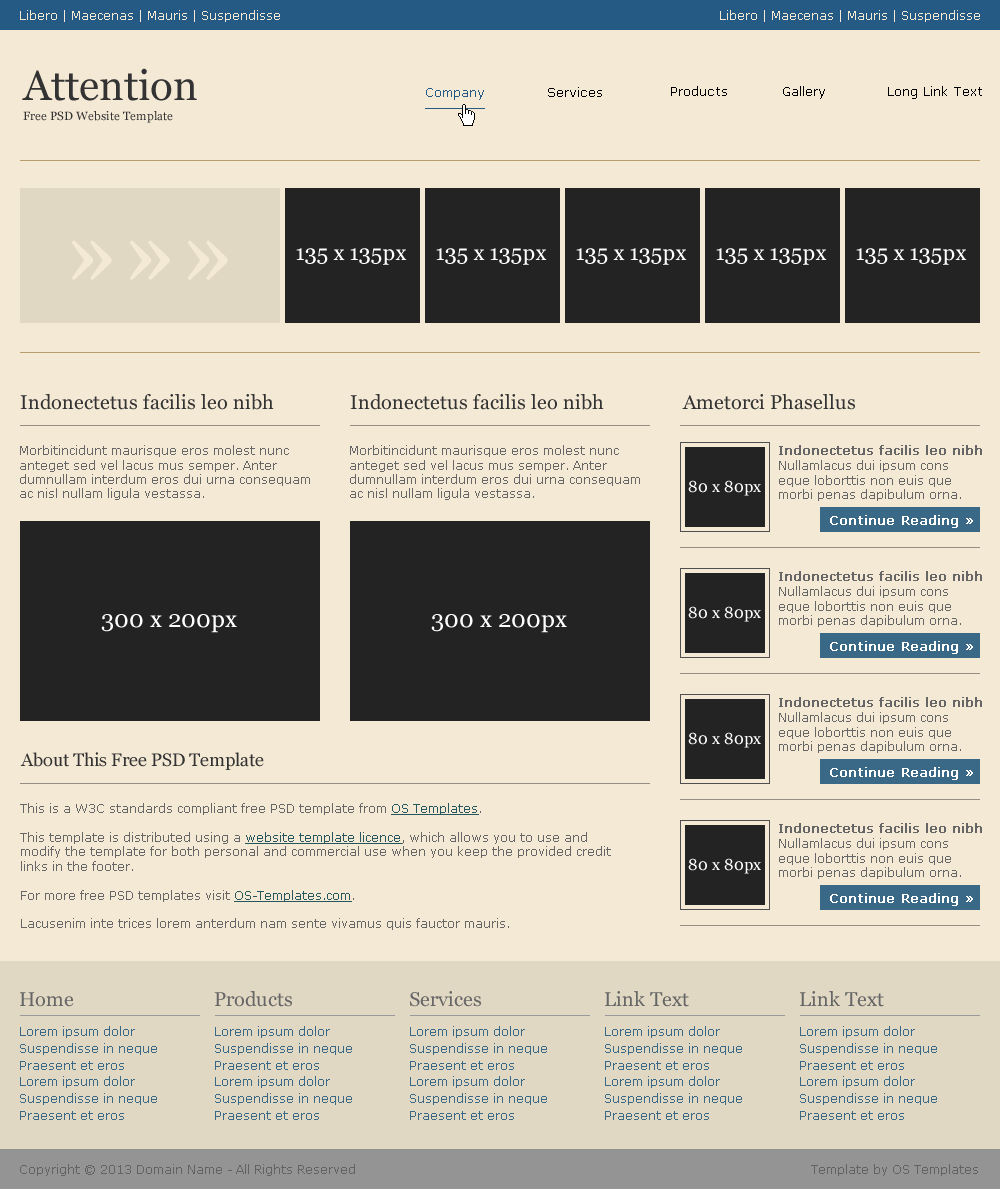
<style>
.page{position:relative;width:1000px;height:1189px;background:#f4e9d5}
.page>*{position:absolute;margin:0}
.t1{font:12px "Verdana";color:#f4e9d5}
.t2{font:42px "Georgia";color:#333333}
.t3{font:13px "Verdana";color:#255a84}
.t4{font:13px "Verdana";color:#000000}
.t5{font:12px "Georgia";color:#333333}
.t6{font:100px "Georgia";color:#f3e9d4}
.t7{font:22px "Georgia";color:#ffffff}
.t8{font:20px "Georgia";color:#333333}
.t9{font:12px/14.4px "Verdana";color:#666666}
.t10{font:12px "Verdana";color:#666666;font-weight:bold}
.t11{font:16px "Georgia";color:#ffffff}
.t12{font:13px "Verdana";color:#ffffff;font-weight:bold}
.t13{font:24px "Georgia";color:#ffffff}
.t14{font:18px "Georgia";color:#333333}
.t15{font:12px/14.4px "Verdana";color:#26575e;text-decoration:underline}
.t16{font:20px "Georgia";color:#666666}
.t17{font:12px/16.8px "Verdana";color:#3a6988}
.t18{font:12px "Verdana";color:#626262}
</style>
<div class="page">
<p class="t1" style="left:20px;top:10px;width:260px;height:12px">Libero | Maecenas | Mauris | Suspendisse</p>
<p class="t1" style="left:720px;top:10px;width:260px;height:12px">Libero | Maecenas | Mauris | Suspendisse</p>
<p class="t2" style="left:22px;top:68px;width:175px;height:33px">Attention</p>
<p class="t3" style="left:426px;top:88px;width:58px;height:12px">Company</p>
<p class="t4" style="left:548px;top:87px;width:54px;height:10px">Services</p>
<p class="t4" style="left:671px;top:86px;width:56px;height:10px">Products</p>
<p class="t4" style="left:783px;top:86px;width:42px;height:13px">Gallery</p>
<p class="t4" style="left:888px;top:86px;width:94px;height:13px">Long Link Text</p>
<p class="t5" style="left:23px;top:111px;width:150px;height:12px">Free PSD Website Template</p>
<p class="t6" style="left:71px;top:240px;width:157px;height:41px">»»»</p>
<p class="t7" style="left:296px;top:248px;width:111px;height:17px">135 x 135px</p>
<p class="t7" style="left:436px;top:248px;width:111px;height:17px">135 x 135px</p>
<p class="t7" style="left:576px;top:248px;width:111px;height:17px">135 x 135px</p>
<p class="t7" style="left:716px;top:248px;width:111px;height:17px">135 x 135px</p>
<p class="t7" style="left:856px;top:248px;width:111px;height:17px">135 x 135px</p>
<p class="t8" style="left:20px;top:394px;width:254px;height:16px">Indonectetus facilis leo nibh</p>
<p class="t8" style="left:350px;top:394px;width:254px;height:16px">Indonectetus facilis leo nibh</p>
<p class="t8" style="left:682px;top:394px;width:173px;height:16px">Ametorci Phasellus</p>
<p class="t9" style="left:20px;top:445px;width:290px;height:55px">Morbitincidunt maurisque eros molest nunc anteget sed vel lacus mus semper. Anter dumnullam interdum eros dui urna consequam ac nisl nullam ligula vestassa.</p>
<p class="t9" style="left:350px;top:445px;width:290px;height:55px">Morbitincidunt maurisque eros molest nunc anteget sed vel lacus mus semper. Anter dumnullam interdum eros dui urna consequam ac nisl nullam ligula vestassa.</p>
<p class="t10" style="left:779px;top:445px;width:203px;height:10px">Indonectetus facilis leo nibh</p>
<p class="t9" style="left:779px;top:460px;width:182px;height:41px">Nullamlacus dui ipsum cons eque loborttis non euis que morbi penas dapibulum orna.</p>
<p class="t11" style="left:688px;top:480px;width:73px;height:16px">80 x 80px</p>
<p class="t12" style="left:830px;top:515px;width:143px;height:13px">Continue Reading »</p>
<p class="t10" style="left:779px;top:571px;width:203px;height:10px">Indonectetus facilis leo nibh</p>
<p class="t9" style="left:779px;top:586px;width:182px;height:41px">Nullamlacus dui ipsum cons eque loborttis non euis que morbi penas dapibulum orna.</p>
<p class="t11" style="left:688px;top:606px;width:73px;height:16px">80 x 80px</p>
<p class="t13" style="left:101px;top:614px;width:136px;height:19px">300 x 200px</p>
<p class="t13" style="left:431px;top:614px;width:136px;height:19px">300 x 200px</p>
<p class="t12" style="left:830px;top:641px;width:143px;height:13px">Continue Reading »</p>
<p class="t10" style="left:779px;top:697px;width:203px;height:10px">Indonectetus facilis leo nibh</p>
<p class="t9" style="left:779px;top:712px;width:182px;height:41px">Nullamlacus dui ipsum cons eque loborttis non euis que morbi penas dapibulum orna.</p>
<p class="t11" style="left:688px;top:732px;width:73px;height:16px">80 x 80px</p>
<p class="t14" style="left:20px;top:752px;width:244px;height:18px">About This Free PSD Template</p>
<p class="t12" style="left:830px;top:767px;width:143px;height:13px">Continue Reading »</p>
<p class="t9" style="left:20px;top:803px;width:591px;height:127px">This is a W3C standards compliant free PSD template from <span class="t15">OS Templates</span>.<br><br>This template is distributed using a <span class="t15">website template licence</span>, which allows you to use and modify the template for both personal and commercial use when you keep the provided credit links in the footer.<br><br>For more free PSD templates visit <span class="t15">OS-Templates.com</span>.<br><br>Lacusenim inte trices lorem anterdum nam sente vivamus quis fauctor mauris.</p>
<p class="t10" style="left:779px;top:823px;width:203px;height:10px">Indonectetus facilis leo nibh</p>
<p class="t9" style="left:779px;top:838px;width:182px;height:41px">Nullamlacus dui ipsum cons eque loborttis non euis que morbi penas dapibulum orna.</p>
<p class="t11" style="left:688px;top:858px;width:73px;height:16px">80 x 80px</p>
<p class="t12" style="left:830px;top:893px;width:143px;height:13px">Continue Reading »</p>
<p class="t16" style="left:20px;top:992px;width:54px;height:15px">Home</p>
<p class="t16" style="left:214px;top:991px;width:78px;height:16px">Products</p>
<p class="t16" style="left:410px;top:991px;width:71px;height:16px">Services</p>
<p class="t16" style="left:605px;top:991px;width:84px;height:16px">Link Text</p>
<p class="t16" style="left:800px;top:991px;width:84px;height:16px">Link Text</p>
<p class="t17" style="left:20px;top:1026px;width:137px;height:94px">Lorem ipsum dolor<br>Suspendisse in neque<br>Praesent et eros<br>Lorem ipsum dolor<br>Suspendisse in neque<br>Praesent et eros</p>
<p class="t17" style="left:215px;top:1026px;width:137px;height:94px">Lorem ipsum dolor<br>Suspendisse in neque<br>Praesent et eros<br>Lorem ipsum dolor<br>Suspendisse in neque<br>Praesent et eros</p>
<p class="t17" style="left:410px;top:1026px;width:137px;height:94px">Lorem ipsum dolor<br>Suspendisse in neque<br>Praesent et eros<br>Lorem ipsum dolor<br>Suspendisse in neque<br>Praesent et eros</p>
<p class="t17" style="left:605px;top:1026px;width:137px;height:94px">Lorem ipsum dolor<br>Suspendisse in neque<br>Praesent et eros<br>Lorem ipsum dolor<br>Suspendisse in neque<br>Praesent et eros</p>
<p class="t17" style="left:800px;top:1026px;width:137px;height:94px">Lorem ipsum dolor<br>Suspendisse in neque<br>Praesent et eros<br>Lorem ipsum dolor<br>Suspendisse in neque<br>Praesent et eros</p>
<p class="t18" style="left:20px;top:1164px;width:335px;height:12px">Copyright © 2013 Domain Name - All Rights Reserved</p>
<p class="t18" style="left:811px;top:1164px;width:167px;height:12px">Template by OS Templates</p>
</div>
